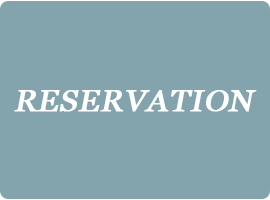
<style>
.page{position:relative;width:270px;height:200px;background:#83a4ad}
.page>*{position:absolute;margin:0}
.t1{font:30px "Georgia";color:#ffffff;font-weight:bold;font-style:italic;scale:1.08 1}
</style>
<div class="page">
<p class="t1" style="left:14px;top:90px;width:243px;height:22px">RESERVATION</p>
</div>
